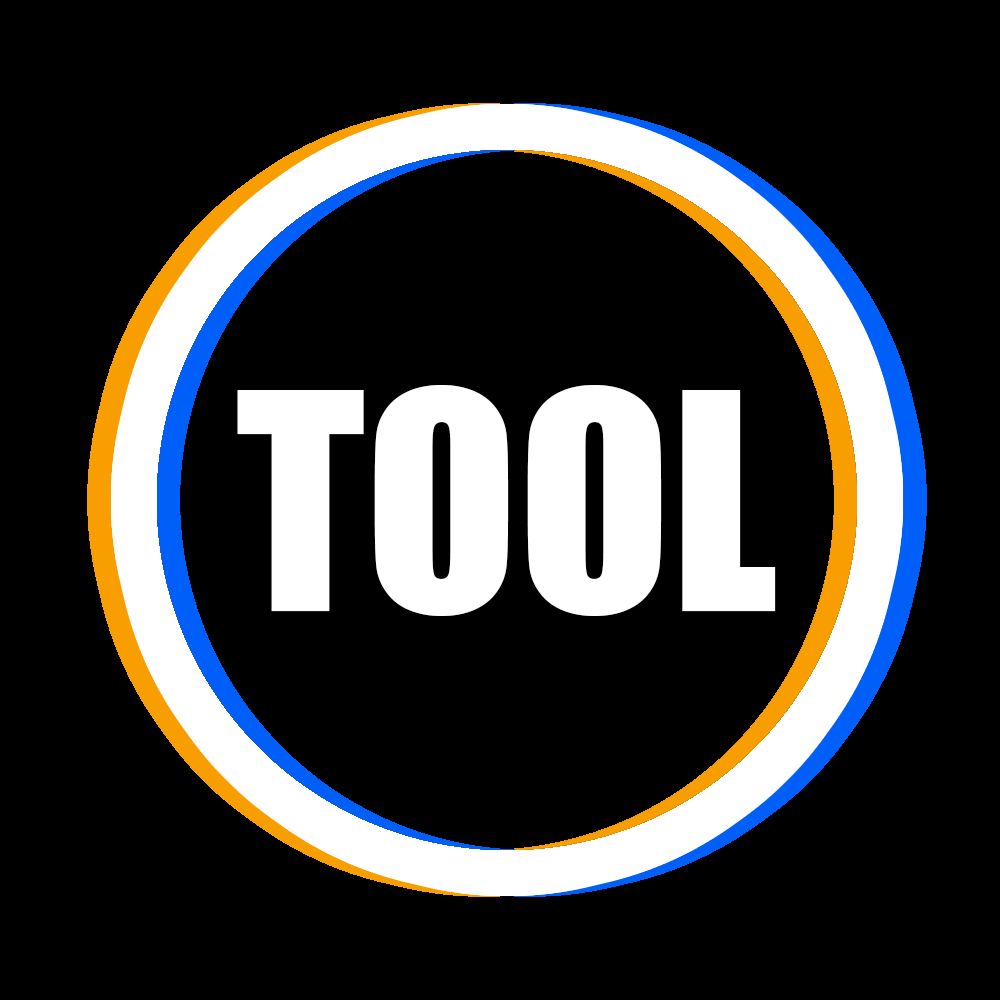
<style>
.page{position:relative;width:1000px;height:1000px;background:#000000}
.page>*{position:absolute;margin:0}
.t1{font:280px "Impact";color:#ffffff}
</style>
<div class="page">
<p class="t1" style="left:237px;top:385px;width:539px;height:231px">TOOL</p>
</div>
